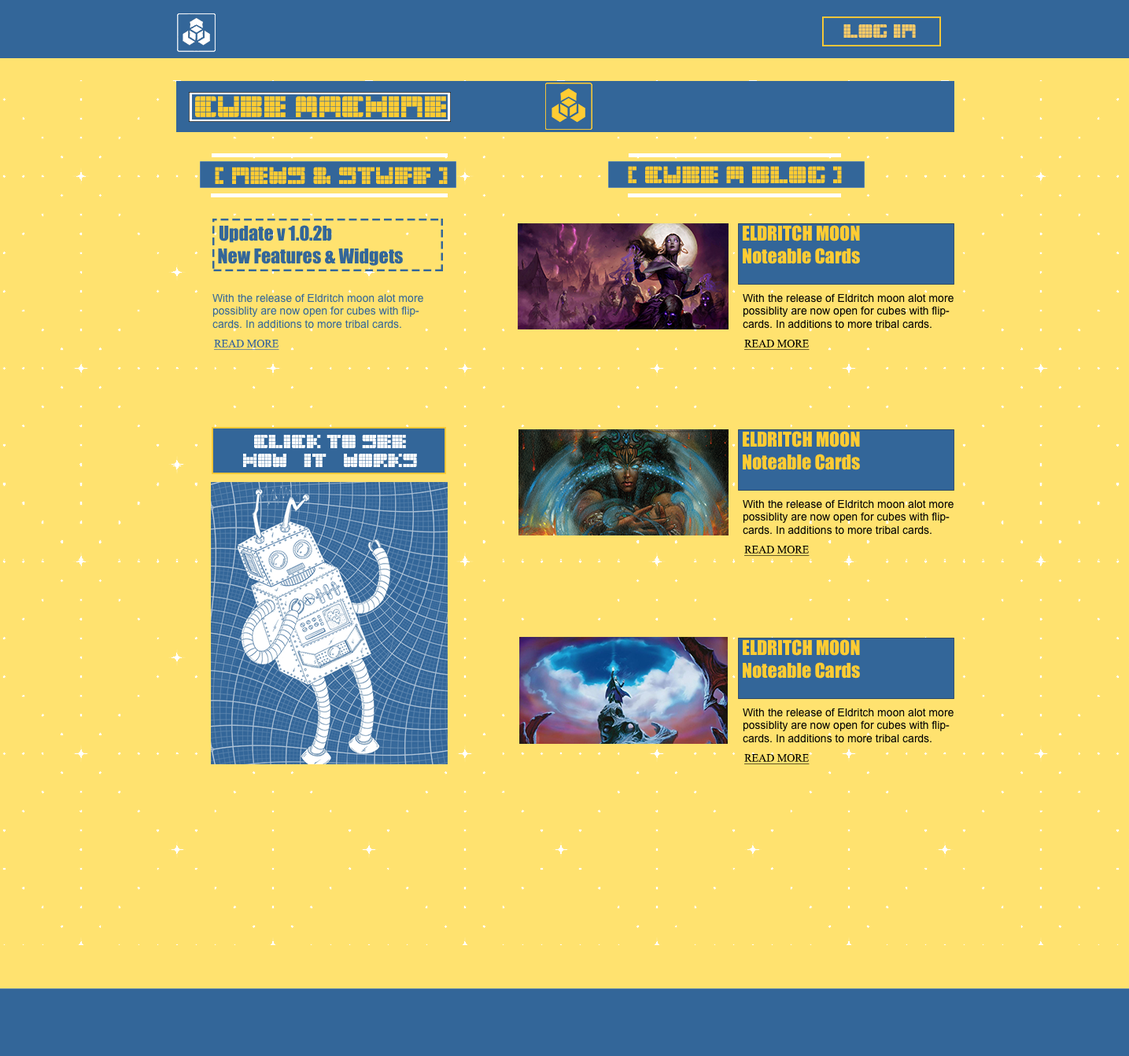
<style>
.page{position:relative;width:1129px;height:1056px;background:#ffe26f}
.page>*{position:absolute;margin:0}
.t1{font:18.9px "Blocks-Regular";color:#ffcc66}
.t2{font:23.6px "Blocks-Regular";color:#ffcc33}
.t3{font:18.9px "Impact";color:#336699}
.t4{font:18.9px "Impact";color:#ffcc33}
.t5{font:11px "ArialMT";color:#336699}
.t6{font:11px "ArialMT";color:#000000}
.t7{font:11px "TimesNewRomanPSMT";color:#336699;text-decoration:underline}
.t8{font:11px "TimesNewRomanPSMT";color:#000000;text-decoration:underline}
.t9{font:18.9px/18.9px "Blocks-Regular";color:#ffffff}
</style>
<div class="page">
<p class="t1" style="left:843px;top:24px;width:73px;height:14px">LOG IN</p>
<p class="t2" style="left:215px;top:167px;width:233px;height:17px">[ news &amp; stuff ]</p>
<p class="t2" style="left:628px;top:166px;width:214px;height:17px">[ CUBE a BLOG ]</p>
<p class="t3" style="left:218px;top:225px;width:185px;height:41px;text-align:center">Update v 1.0.2b<br>      New Features &amp; Widgets</p>
<p class="t4" style="left:743px;top:225px;width:117px;height:39px;text-align:center">ELDRITCH MOON<br>Noteable Cards</p>
<p class="t5" style="left:212px;top:293px;width:211px;height:36px">With the release of Eldritch moon alot more <br>possiblity are now open for cubes with flip-<br>cards. In additions to more tribal cards.</p>
<p class="t6" style="left:743px;top:293px;width:210px;height:36px">With the release of Eldritch moon alot more <br>possiblity are now open for cubes with flip-<br>cards. In additions to more tribal cards.</p>
<p class="t7" style="left:214px;top:340px;width:65px;height:10px">READ MORE</p>
<p class="t8" style="left:744px;top:340px;width:65px;height:10px">READ MORE</p>
<p class="t9" style="left:243px;top:435px;width:174px;height:32px;text-align:center">click to see<br>how   it   works</p>
<p class="t4" style="left:743px;top:431px;width:117px;height:39px;text-align:center">ELDRITCH MOON<br>Noteable Cards</p>
<p class="t6" style="left:743px;top:499px;width:210px;height:36px">With the release of Eldritch moon alot more <br>possiblity are now open for cubes with flip-<br>cards. In additions to more tribal cards.</p>
<p class="t8" style="left:744px;top:546px;width:65px;height:10px">READ MORE</p>
<p class="t4" style="left:743px;top:640px;width:117px;height:39px;text-align:center">ELDRITCH MOON<br>Noteable Cards</p>
<p class="t6" style="left:743px;top:708px;width:210px;height:35px">With the release of Eldritch moon alot more <br>possiblity are now open for cubes with flip-<br>cards. In additions to more tribal cards.</p>
<p class="t8" style="left:744px;top:754px;width:65px;height:11px">READ MORE</p>
</div>
